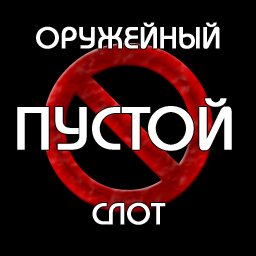
<style>
.page{position:relative;width:256px;height:256px;background:#000000}
.page>*{position:absolute;margin:0}
.t1{font:30px "BauhausC-Medium";color:#ffffff;font-weight:bold}
.t2{font:60px "BauhausC-Medium";color:#ffffff;font-weight:bold}
</style>
<div class="page">
<p class="t1" style="left:36px;top:22px;width:184px;height:27px">ОРУЖЕЙНЫЙ</p>
<p class="t2" style="left:17px;top:98px;width:215px;height:53px">ПУСТОЙ</p>
<p class="t1" style="left:92px;top:202px;width:74px;height:23px">СЛОТ</p>
</div>
